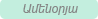
<style>
.page{position:relative;width:98px;height:19px;background:#c3eede}
.page>*{position:absolute;margin:0}
.t1{font:12px "Arial-ItalicMT";letter-spacing:0.005em;color:#868686}
</style>
<div class="page">
<p class="t1" style="left:23px;top:4px;width:55px;height:11px">Ամենօրյա</p>
</div>
